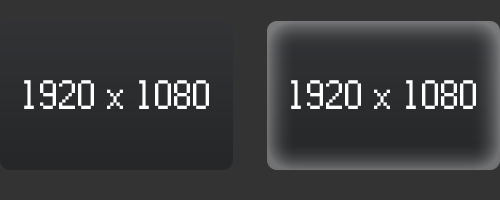
<style>
.page{position:relative;width:500px;height:200px;background:#333333}
.page>*{position:absolute;margin:0}
.t1{font:41.7px "Power-Green";color:#ffffff}
</style>
<div class="page">
<p class="t1" style="left:24px;top:80px;width:185px;height:29px">1920 x 1080</p>
<p class="t1" style="left:291px;top:80px;width:185px;height:29px">1920 x 1080</p>
</div>
